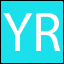
<style>
.page{position:relative;width:64px;height:64px;background:#1ae0ec}
.page>*{position:absolute;margin:0}
.t1{font:55px "MyriadHebrew-Regular";color:#ffffff}
</style>
<div class="page">
<p class="t1" style="left:3px;top:13px;width:58px;height:38px">YR</p>
</div>
